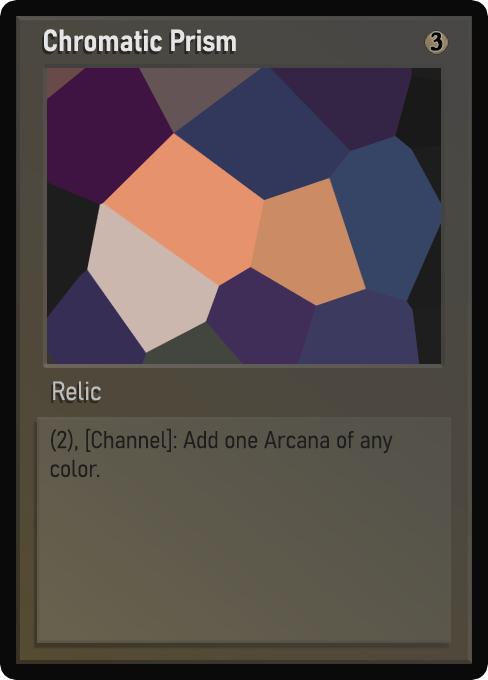
<style>
.page{position:relative;width:488px;height:680px}
.page>*{position:absolute;margin:0}
.t1{font:30px "Bahnschrift-SemiBoldSemiCondensed";color:#f2f2f2;font-weight:bold}
.t2{font:25px "WTRRoycroft";color:#000000;font-weight:bold;scale:1.09 1}
.t3{font:26px "Bahnschrift-LightSemiCondensed";color:#c8c8c8;font-weight:bold}
.t4{font:24px "Bahnschrift-LightSemiCondensed";color:#1e1e1e;font-weight:bold}
</style>
<div class="page">
<p class="t1" style="left:44px;top:29px;width:192px;height:23px;opacity:0.9">Chromatic Prism</p>
<p class="t2" style="left:430px;top:32px;width:13px;height:19px">3</p>
<p class="t3" style="left:53px;top:381px;width:48px;height:20px;opacity:0.9">Relic</p>
<p class="t4" style="left:50px;top:428px;width:343px;height:50px">(2), [Channel]: Add one Arcana of any color.</p>
</div>
